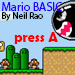
<style>
.page{position:relative;width:75px;height:75px;background:#add5f8}
.page>*{position:absolute;margin:0}
.t1{font:12px/10px "MyriadPro-Regular";color:#2a00ff}
.t2{font:9px/8px "MyriadPro-Regular";color:#000000}
.t3{font:14px "BerlinSansFBDemi-Bold";color:#fe0000}
</style>
<div class="page">
<p class="t1" style="left:2px;top:2px;width:60px;height:19px">Mario BASIC<br><span class="t2">By Neil Rao</span></p>
<p class="t3" style="left:14px;top:32px;width:44px;height:12px">press A</p>
</div>
